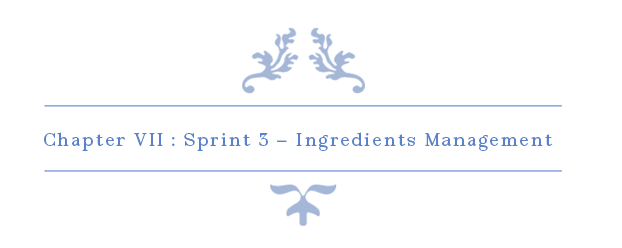
<style>
.page{position:relative;width:622px;height:248px;background:#ffffff}
.page>*{position:absolute;margin:0}
.t1{font:18px "Vega-Regular";letter-spacing:0.1em;color:#5982cb}
</style>
<div class="page">
<p class="t1" style="left:44px;top:132px;width:509px;height:19px">Chapter VII : Sprint 3 – Ingredients Management</p>
</div>
